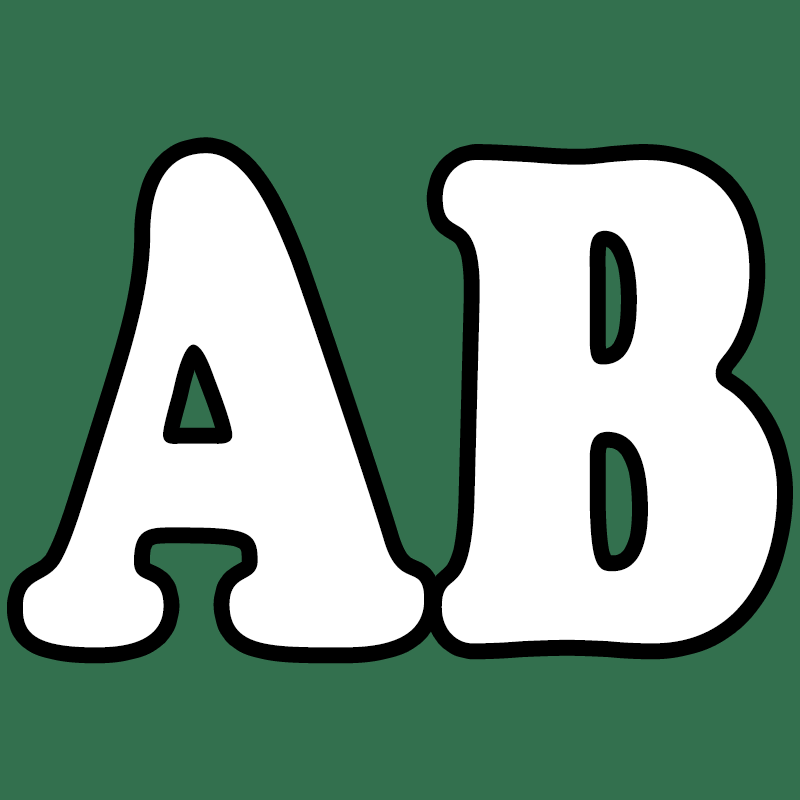
<style>
.page{position:relative;width:800px;height:800px;background:#33704e}
.page>*{position:absolute;margin:0}
.t1{font:677.3px "CooperBlackStd";letter-spacing:0.025em;color:#ffffff;scale:0.68 1}
</style>
<div class="page">
<p class="t1" style="left:23px;top:153px;width:754px;height:495px">AB</p>
</div>
